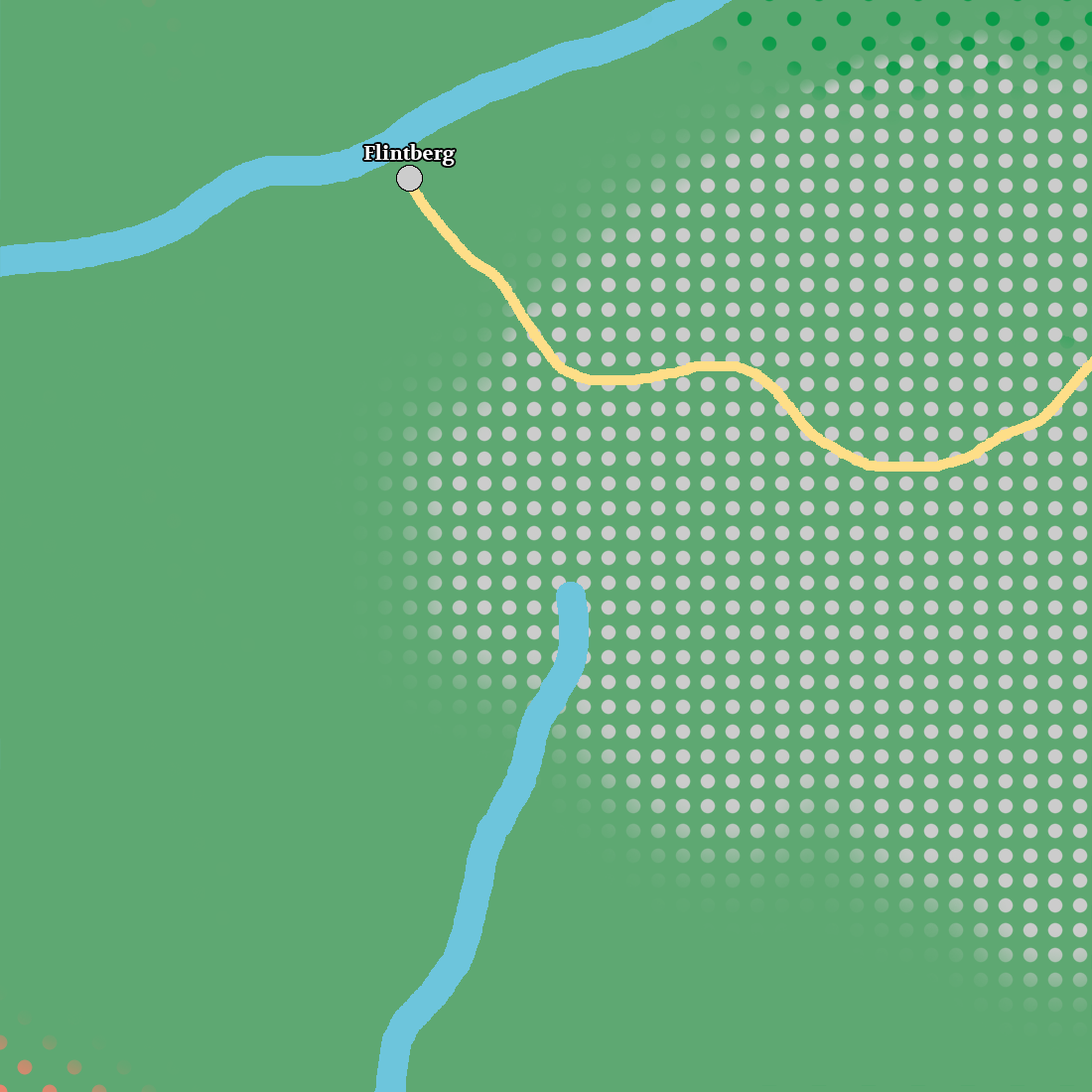
<style>
.page{position:relative;width:1092px;height:1092px;background:#5ea872}
.page>*{position:absolute;margin:0}
.t1{font:19.9px "Volkhov-Bold";color:#ffffff}
</style>
<div class="page">
<p class="t1" style="left:363px;top:144px;width:92px;height:22px">Flintberg</p>
</div>
